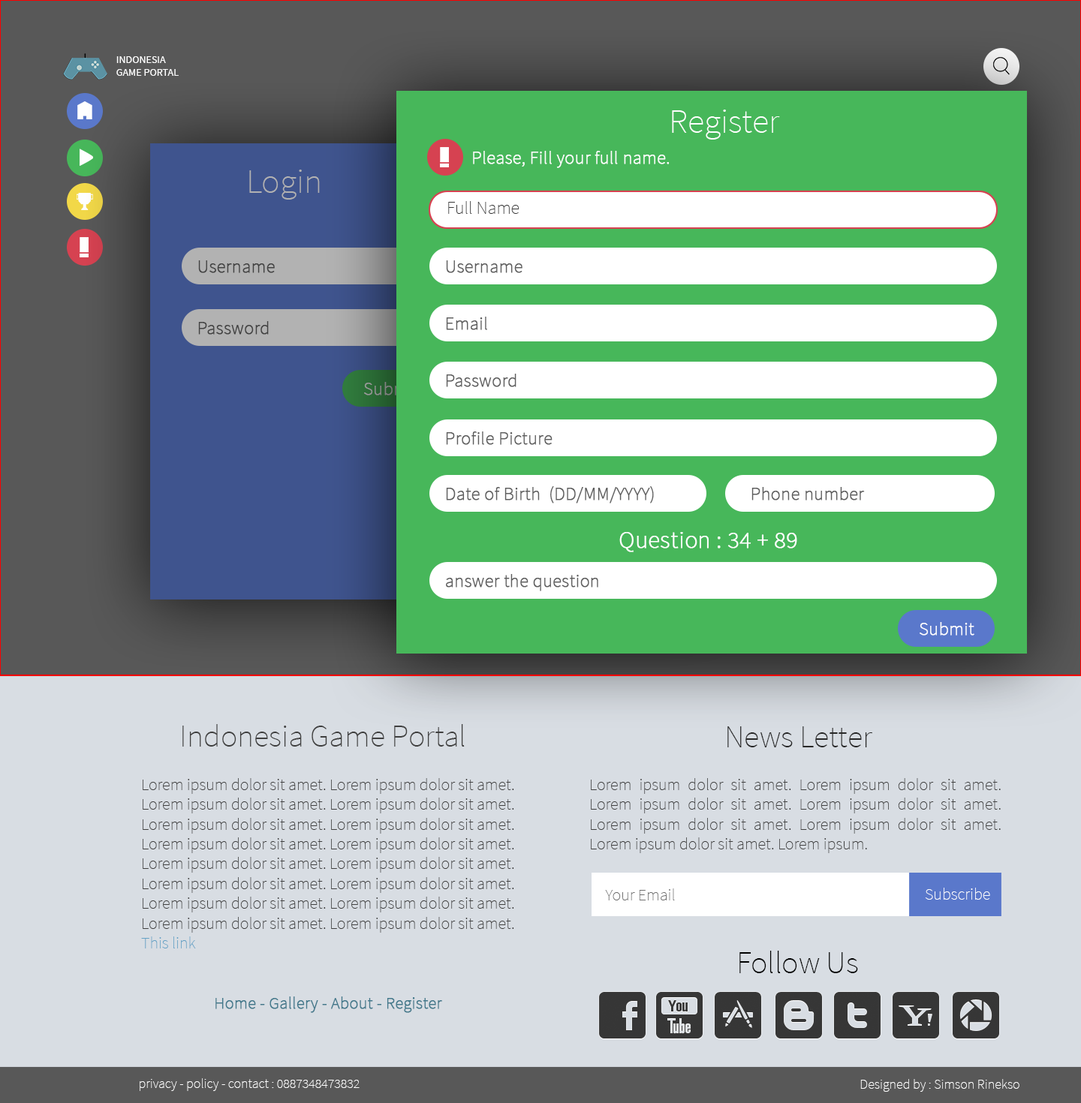
<style>
.page{position:relative;width:1081px;height:1103px;background:#d8dde3}
.page>*{position:absolute;margin:0}
.t1{font:10.5px "SourceSansPro-Regular";color:#fefefe}
.t2{font:34.5px "SourceSansPro-ExtraLight";color:#ffffff}
.t3{font:18px "SourceSansPro-ExtraLight";color:#ffffff;font-weight:bold}
.t4{font:34.5px "SourceSansPro-ExtraLight";color:#b2b2b2}
.t5{font:18px "SourceSansPro-ExtraLight";color:#383838}
.t6{font:18px "SourceSansPro-ExtraLight";color:#414141;font-weight:bold}
.t7{font:18px "SourceSansPro-ExtraLight";color:#5d5d5d;font-weight:bold}
.t8{font:18px "SourceSansPro-ExtraLight";font-weight:bold}
.t9{font:24px "SourceSansPro-ExtraLight";color:#ffffff;font-weight:bold}
.t10{font:31.5px "SourceSansPro-ExtraLight";color:#3f3f3f}
.t11{font:31.5px "SourceSansPro-ExtraLight";color:#282828}
.t12{font:16.5px "SourceSansPro-ExtraLight";color:#3f3f3f}
.t13{font:16.5px "SourceSansPro-ExtraLight";color:#65a2c6}
.t14{font:16.5px "SourceSansPro-ExtraLight";color:#6f6f6f}
.t15{font:16.5px "SourceSansPro-ExtraLight";color:#ffffff}
.t16{font:31.5px "SourceSansPro-ExtraLight";color:#000000}
.t17{font:16.5px "SourceSansPro-ExtraLight";color:#42788b;font-weight:bold}
.t18{font:13.5px "SourceSansPro-ExtraLight";color:#ffffff}
</style>
<div class="page">
<p class="t1" style="left:116px;top:56px;width:63px;height:20px">INDONESIA<br>GAME PORTAL</p>
<p class="t2" style="left:672px;top:110px;width:108px;height:30px">Register</p>
<p class="t3" style="left:473px;top:151px;width:196px;height:17px">Please, Fill your full name.</p>
<p class="t4" style="left:249px;top:170px;width:71px;height:30px">Login</p>
<p class="t5" style="left:448px;top:201px;width:71px;height:13px">Full Name</p>
<p class="t6" style="left:198px;top:260px;width:77px;height:13px">Username</p>
<p class="t7" style="left:446px;top:260px;width:76px;height:13px">Username</p>
<p class="t7" style="left:446px;top:317px;width:41px;height:13px">Email</p>
<p class="t6" style="left:198px;top:321px;width:71px;height:14px">Password</p>
<p class="t7" style="left:446px;top:374px;width:70px;height:13px">Password</p>
<p class="t8" style="left:364px;top:382px;width:55px;height:14px">Submit</p>
<p class="t7" style="left:446px;top:432px;width:106px;height:13px">Profile Picture</p>
<p class="t7" style="left:446px;top:486px;width:208px;height:18px">Date of Birth  (DD/MM/YYYY)</p>
<p class="t7" style="left:751px;top:487px;width:114px;height:14px">Phone number</p>
<p class="t9" style="left:619px;top:532px;width:178px;height:20px">Question : 34 + 89</p>
<p class="t7" style="left:446px;top:574px;width:152px;height:17px">answer the question</p>
<p class="t3" style="left:919px;top:622px;width:55px;height:14px">Submit</p>
<p class="t10" style="left:182px;top:724px;width:283px;height:23px">Indonesia Game Portal</p>
<p class="t11" style="left:727px;top:727px;width:145px;height:21px">News Letter</p>
<p class="t12" style="left:141px;top:778px;width:373px;height:171px">Lorem ipsum dolor sit amet. Lorem ipsum dolor sit amet. Lorem ipsum dolor sit amet. Lorem ipsum dolor sit amet. Lorem ipsum dolor sit amet. Lorem ipsum dolor sit amet. Lorem ipsum dolor sit amet. Lorem ipsum dolor sit amet. Lorem ipsum dolor sit amet. Lorem ipsum dolor sit amet. Lorem ipsum dolor sit amet. Lorem ipsum dolor sit amet. Lorem ipsum dolor sit amet. Lorem ipsum dolor sit amet. Lorem ipsum dolor sit amet. Lorem ipsum dolor sit amet.  <span class="t13">This link</span></p>
<p class="t12" style="left:591px;top:778px;width:409px;height:75px;text-align:justify">Lorem ipsum dolor sit amet. Lorem ipsum dolor sit amet. Lorem ipsum dolor sit amet. Lorem ipsum dolor sit amet. Lorem ipsum dolor sit amet. Lorem ipsum dolor sit amet. Lorem ipsum dolor sit amet. Lorem ipsum.</p>
<p class="t14" style="left:605px;top:889px;width:70px;height:12px">Your Email</p>
<p class="t15" style="left:925px;top:888px;width:65px;height:12px">Subscribe</p>
<p class="t16" style="left:739px;top:951px;width:119px;height:22px">Follow Us</p>
<p class="t17" style="left:215px;top:997px;width:227px;height:16px">Home - Gallery - About - Register</p>
<p class="t18" style="left:140px;top:1079px;width:220px;height:12px">privacy - policy - contact : 0887348473832</p>
<p class="t18" style="left:860px;top:1079px;width:159px;height:13px">Designed by : Simson Rinekso</p>
</div>
